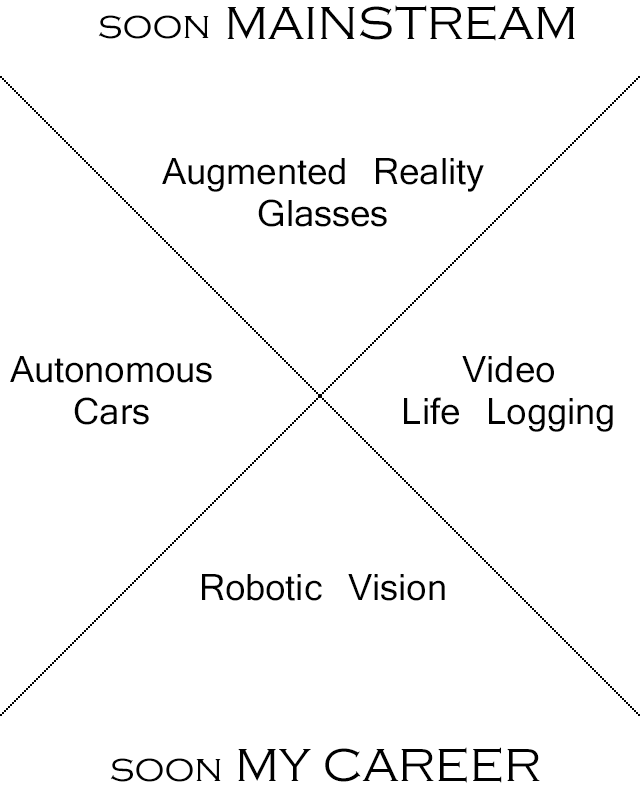
<style>
.page{position:relative;width:640px;height:792px;background:#ffffff}
.page>*{position:absolute;margin:0}
.t1{font:48px "CopperplateGothic-Light";color:#000000}
.t2{font:40px "CopperplateGothic-Light";color:#000000}
.t3{font:35px "Kartika";color:#000000}
</style>
<div class="page">
<p class="t1" style="left:227px;top:5px;width:348px;height:36px">MAINSTREAM</p>
<p class="t2" style="left:98px;top:15px;width:111px;height:24px">soon</p>
<p class="t3" style="left:162px;top:158px;width:322px;height:69px;text-align:center">Augmented Reality<br>Glasses</p>
<p class="t3" style="left:10px;top:356px;width:202px;height:69px;text-align:center">Autonomous<br>Cars</p>
<p class="t3" style="left:404px;top:356px;width:209px;height:76px;text-align:center">Video<br>Life Logging</p>
<p class="t3" style="left:202px;top:574px;width:243px;height:27px">Robotic Vision</p>
<p class="t1" style="left:238px;top:747px;width:302px;height:36px">MY CAREER</p>
<p class="t2" style="left:110px;top:758px;width:111px;height:24px">soon</p>
</div>
